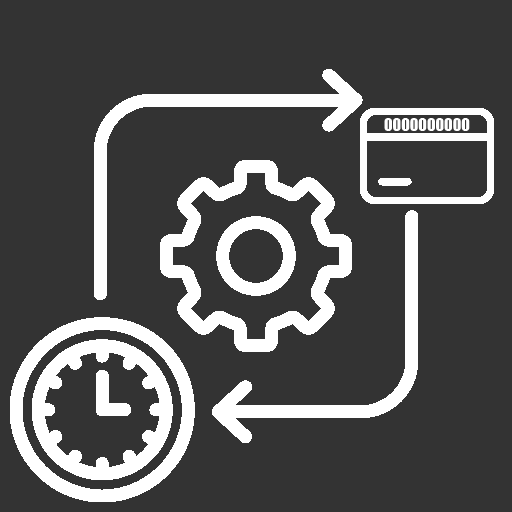
<style>
.page{position:relative;width:512px;height:512px;background:#333333}
.page>*{position:absolute;margin:0}
.t1{font:16px "Impact";color:#ffffff}
</style>
<div class="page">
<p class="t1" style="left:384px;top:118px;width:86px;height:13px">0000000000</p>
</div>
